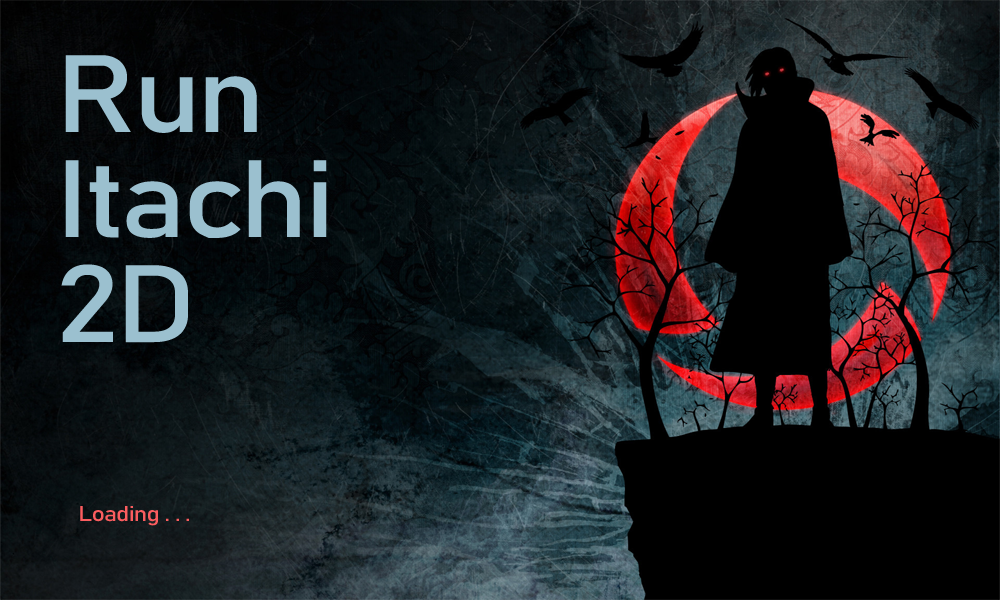
<style>
.page{position:relative;width:1000px;height:600px}
.page>*{position:absolute;margin:0}
.t1{font:107.6px "Bahnschrift";letter-spacing:-0.04em;color:#9bc0cf;scale:1.16 1}
.t2{font:21.4px "Bahnschrift";letter-spacing:-0.04em;color:#fb5d5f;scale:1.16 1}
</style>
<div class="page">
<p class="t1" style="left:61px;top:55px;width:266px;height:288px">Run<br>Itachi<br>2D</p>
<p class="t2" style="left:80px;top:506px;width:109px;height:20px">Loading . . .</p>
</div>
